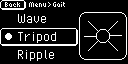
<style>
.page{position:relative;width:128px;height:64px;background:#000000}
.page>*{position:absolute;margin:0}
.t1{font:8px "6pxNormal";color:#ffffff}
.t2{font:16px "PixelOperator";color:#ffffff}
</style>
<div class="page">
<p class="t1" style="left:5px;top:2px;width:15px;height:5px">Back</p>
<p class="t1" style="left:29px;top:2px;width:17px;height:5px">Menu</p>
<p class="t1" style="left:48px;top:2px;width:3px;height:5px">&gt;</p>
<p class="t1" style="left:53px;top:2px;width:12px;height:5px">Gait</p>
<p class="t2" style="left:18px;top:14px;width:28px;height:9px">Wave</p>
<p class="t2" style="left:18px;top:32px;width:38px;height:11px">Tripod</p>
<p class="t2" style="left:18px;top:50px;width:36px;height:11px">Ripple</p>
</div>
